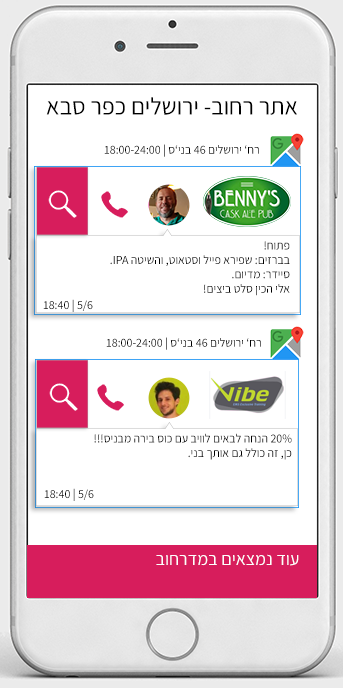
<style>
.page{position:relative;width:343px;height:688px;background:#ffffff}
.page>*{position:absolute;margin:0}
.t1{font:24px "Assistant-Regular";color:#000000}
.t2{font:12px "Assistant-Regular";color:#000000}
.t3{font:18px "Assistant-Regular";color:#fefefe}
</style>
<div class="page">
<p class="t1" style="left:46px;top:97px;width:251px;height:18px">אתר רחוב- ירושלים כפר סבא</p>
<p class="t2" style="left:104px;top:144px;width:155px;height:13px">רח’ ירושלים 46 בני’ס | 18:00-24:00</p>
<p class="t2" style="left:110px;top:241px;width:180px;height:55px">פתוח!<br>בברזים: שפירא פייל וסטאוט, והשיטה IPA.<br>סיידר: מדיום.<br>אלי הכין סלט ביצים!</p>
<p class="t2" style="left:43px;top:299px;width:50px;height:13px">5/6 | 18:40</p>
<p class="t2" style="left:106px;top:337px;width:155px;height:13px">רח’ ירושלים 46 בני’ס | 18:00-24:00</p>
<p class="t2" style="left:94px;top:433px;width:198px;height:27px">20% הנחה לבאים לוויב עם כוס בירה מבניס!!!<br>כן, זה כולל גם אותך בני.</p>
<p class="t2" style="left:44px;top:488px;width:50px;height:13px">5/6 | 18:40</p>
<p class="t3" style="left:156px;top:554px;width:143px;height:12px">עוד נמצאים במדרחוב</p>
</div>
